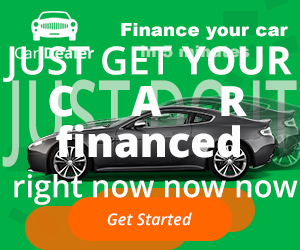
<style>
.page{position:relative;width:300px;height:250px;background:#00af46}
.page>*{position:absolute;margin:0}
.t1{font:18px "Arial-Black";letter-spacing:0.01em;color:#ffffff}
.t2{font:38.7px "OpenSans-Semibold";color:#fcfcfc}
.t3{font:38.7px "OpenSans-Bold";color:#fcfcfc}
.t4{font:16px "Arial-Black";letter-spacing:0.01em}
.t5{font:94.6px "OpenSans-Semibold";scale:0.61 1}
.t6{font:41.7px "OpenSans-Extrabold";letter-spacing:1.36em;color:#fcfcfc}
.t7{font:41.7px "OpenSans-Extrabold";color:#fcfcfc}
.t8{font:30.9px "OpenSans-Semibold";color:#fcfcfc}
.t9{font:16px "OpenSans-SemiboldItalic";letter-spacing:0.01em;color:#ffffff}
</style>
<div class="page">
<p class="t1" style="left:121px;top:23px;width:167px;height:17px">Finance your car</p>
<p class="t2" style="left:3px;top:46px;width:289px;height:36px">JUST GET <span class="t3">YOUR</span></p>
<p class="t4" style="left:141px;top:45px;width:109px;height:13px">in 5 minutes</p>
<p class="t5" style="left:2px;top:79px;width:295px;height:88px">JUST DO IT</p>
<p class="t6" style="left:49px;top:85px;width:198px;height:32px">CAR</p>
<p class="t7" style="left:56px;top:124px;width:184px;height:34px">financed</p>
<p class="t8" style="left:14px;top:174px;width:284px;height:31px">right now now now</p>
<p class="t9" style="left:107px;top:212px;width:85px;height:14px">Get Started</p>
</div>
